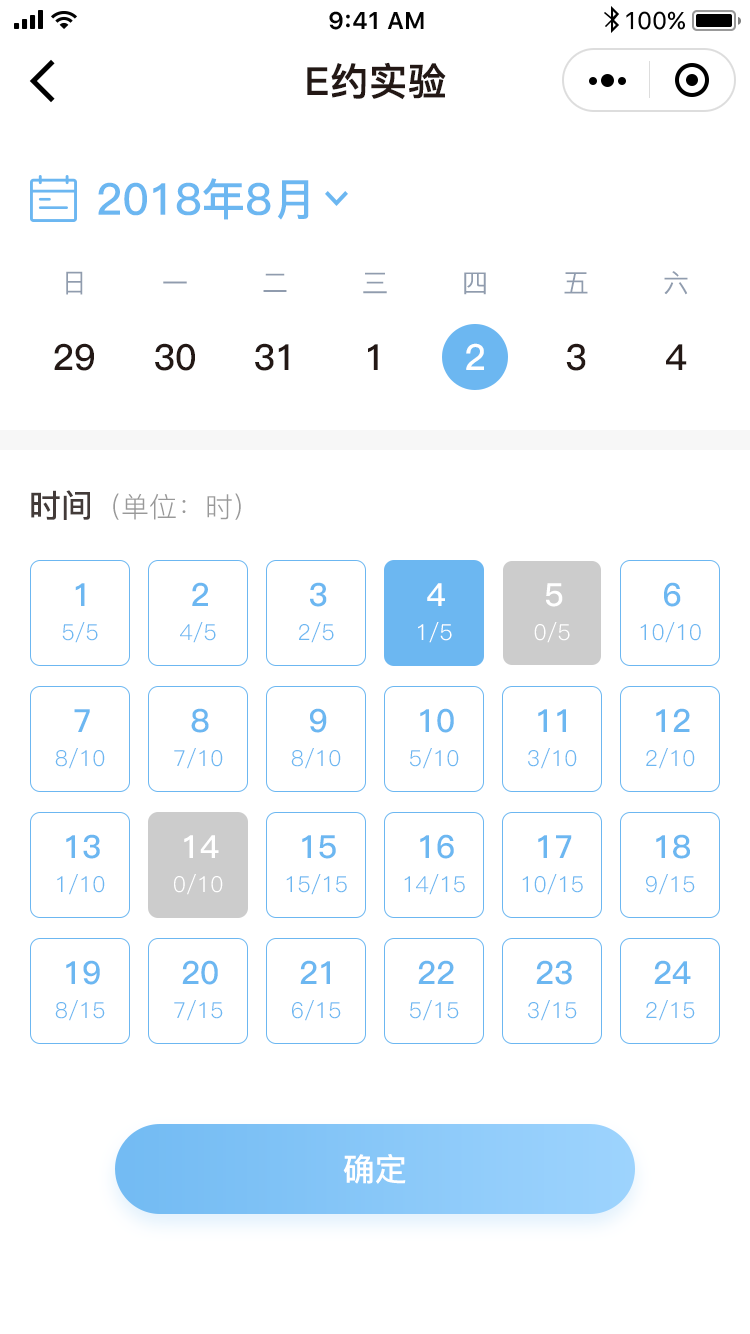
<style>
.page{position:relative;width:750px;height:1334px;background:#ffffff}
.page>*{position:absolute;margin:0}
.t1{font:38px "PingFang-SC-Bold";color:#231815;font-weight:bold}
.t2{font:44px "PingFang-SC-Bold";color:#6cb7f1}
.t3{font:26px "PingFang-SC-Medium";color:#909cae}
.t4{font:36px "PingFang-SC-Bold";color:#231815}
.t5{font:36px "PingFang-SC-Bold";color:#ffffff}
.t6{font:28px "PingFang-SC-Regular";color:#999999}
.t7{font:32px "PingFang-SC-Bold";color:#433b39}
.t8{font:32px "PingFang-SC-Bold";color:#6cb7f1}
.t9{font:32px "PingFang-SC-Bold";color:#ffffff}
.t10{font:22px "PingFang-SC-Regular";color:#6cb7f1}
.t11{font:22px "PingFang-SC-Regular";color:#ffffff}
</style>
<div class="page">
<p class="t1" style="left:307px;top:62px;width:139px;height:38px">E约实验</p>
<p class="t2" style="left:98px;top:178px;width:211px;height:42px">2018年8月</p>
<p class="t3" style="left:66px;top:271px;width:17px;height:24px">日</p>
<p class="t3" style="left:163px;top:281px;width:24px;height:3px">一</p>
<p class="t3" style="left:263px;top:273px;width:24px;height:19px">二</p>
<p class="t3" style="left:363px;top:272px;width:24px;height:22px">三</p>
<p class="t3" style="left:464px;top:272px;width:22px;height:23px">四</p>
<p class="t3" style="left:564px;top:272px;width:24px;height:22px">五</p>
<p class="t3" style="left:664px;top:271px;width:24px;height:24px">六</p>
<p class="t4" style="left:54px;top:343px;width:40px;height:28px">29</p>
<p class="t4" style="left:155px;top:343px;width:40px;height:28px">30</p>
<p class="t4" style="left:255px;top:343px;width:34px;height:28px">31</p>
<p class="t4" style="left:368px;top:344px;width:10px;height:26px">1</p>
<p class="t5" style="left:466px;top:343px;width:18px;height:27px">2</p>
<p class="t4" style="left:566px;top:343px;width:20px;height:28px">3</p>
<p class="t4" style="left:666px;top:344px;width:21px;height:26px">4</p>
<p class="t6" style="left:31px;top:490px;width:210px;height:30px"><span class="t7">时间</span>（单位：时）</p>
<p class="t8" style="left:192px;top:582px;width:16px;height:24px">2</p>
<p class="t8" style="left:310px;top:582px;width:17px;height:25px">3</p>
<p class="t8" style="left:664px;top:582px;width:17px;height:25px">6</p>
<p class="t8" style="left:75px;top:583px;width:10px;height:23px">1</p>
<p class="t9" style="left:427px;top:583px;width:18px;height:23px">4</p>
<p class="t9" style="left:546px;top:583px;width:17px;height:24px">5</p>
<p class="t10" style="left:62px;top:622px;width:36px;height:21px">5/5</p>
<p class="t10" style="left:180px;top:622px;width:36px;height:21px">4/5</p>
<p class="t10" style="left:299px;top:622px;width:35px;height:21px">2/5</p>
<p class="t11" style="left:418px;top:622px;width:34px;height:21px">1/5</p>
<p class="t11" style="left:534px;top:622px;width:36px;height:21px">0/5</p>
<p class="t10" style="left:640px;top:622px;width:61px;height:21px">10/10</p>
<p class="t8" style="left:74px;top:709px;width:16px;height:23px">7</p>
<p class="t8" style="left:191px;top:708px;width:18px;height:25px">8</p>
<p class="t8" style="left:310px;top:708px;width:17px;height:25px">9</p>
<p class="t8" style="left:420px;top:708px;width:34px;height:25px">10</p>
<p class="t8" style="left:538px;top:709px;width:28px;height:23px">11</p>
<p class="t8" style="left:656px;top:708px;width:34px;height:24px">12</p>
<p class="t10" style="left:55px;top:748px;width:50px;height:21px">8/10</p>
<p class="t10" style="left:174px;top:748px;width:49px;height:21px">7/10</p>
<p class="t10" style="left:291px;top:748px;width:50px;height:21px">8/10</p>
<p class="t10" style="left:410px;top:748px;width:49px;height:21px">5/10</p>
<p class="t10" style="left:528px;top:748px;width:49px;height:21px">3/10</p>
<p class="t10" style="left:646px;top:748px;width:49px;height:21px">2/10</p>
<p class="t8" style="left:66px;top:834px;width:34px;height:25px">13</p>
<p class="t9" style="left:184px;top:835px;width:35px;height:23px">14</p>
<p class="t8" style="left:302px;top:835px;width:34px;height:24px">15</p>
<p class="t8" style="left:420px;top:834px;width:34px;height:25px">16</p>
<p class="t8" style="left:538px;top:835px;width:34px;height:23px">17</p>
<p class="t8" style="left:656px;top:834px;width:34px;height:25px">18</p>
<p class="t10" style="left:57px;top:874px;width:48px;height:21px">1/10</p>
<p class="t11" style="left:174px;top:874px;width:49px;height:21px">0/10</p>
<p class="t10" style="left:286px;top:874px;width:61px;height:21px">15/15</p>
<p class="t10" style="left:404px;top:874px;width:61px;height:21px">14/15</p>
<p class="t10" style="left:522px;top:874px;width:61px;height:21px">10/15</p>
<p class="t10" style="left:646px;top:874px;width:49px;height:21px">9/15</p>
<p class="t8" style="left:66px;top:960px;width:34px;height:25px">19</p>
<p class="t8" style="left:182px;top:960px;width:36px;height:25px">20</p>
<p class="t8" style="left:300px;top:960px;width:30px;height:24px">21</p>
<p class="t8" style="left:418px;top:960px;width:36px;height:24px">22</p>
<p class="t8" style="left:536px;top:960px;width:36px;height:25px">23</p>
<p class="t8" style="left:654px;top:960px;width:37px;height:24px">24</p>
<p class="t10" style="left:55px;top:1000px;width:50px;height:21px">8/15</p>
<p class="t10" style="left:174px;top:1000px;width:49px;height:21px">7/15</p>
<p class="t10" style="left:292px;top:1000px;width:49px;height:21px">6/15</p>
<p class="t10" style="left:410px;top:1000px;width:49px;height:21px">5/15</p>
<p class="t10" style="left:528px;top:1000px;width:49px;height:21px">3/15</p>
<p class="t10" style="left:646px;top:1000px;width:49px;height:21px">2/15</p>
<p class="t9" style="left:343px;top:1154px;width:63px;height:30px">确定</p>
</div>
